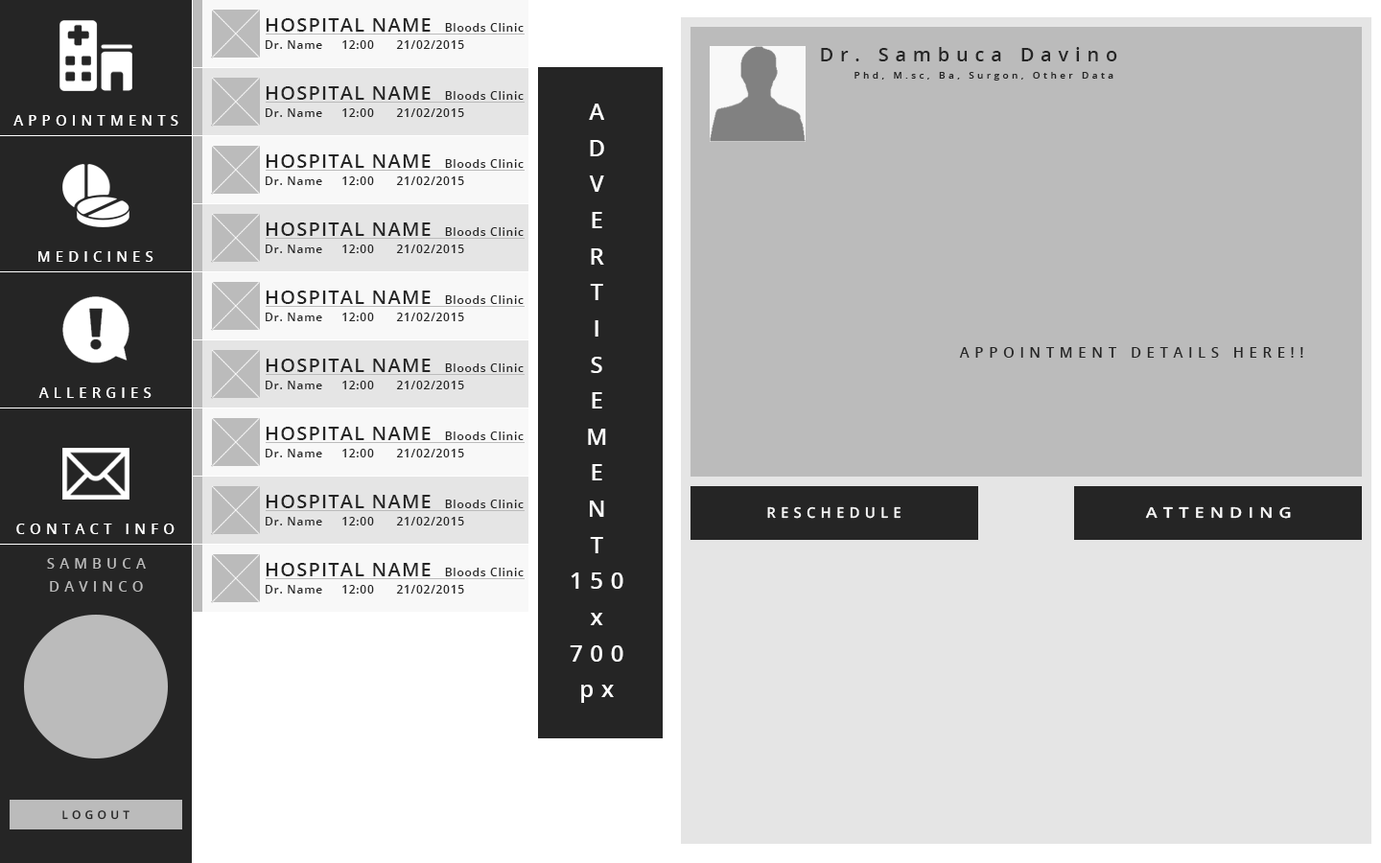
<style>
.page{position:relative;width:1381px;height:863px;background:#bbbbbb}
.page>*{position:absolute;margin:0}
.t1{font:19.2px "OpenSans-Semibold";letter-spacing:0.06em;color:#252525}
.t2{font:11.5px "OpenSans-Semibold";letter-spacing:0.06em;color:#252525}
.t3{font:9.6px/17.3px "OpenSans-Semibold";letter-spacing:0.34em;color:#252525}
.t4{font:19.2px "OpenSans-Semibold";letter-spacing:0.34em;color:#252525}
.t5{font:22.6px/36.1px "OpenSans-Semibold";letter-spacing:0.34em;color:#ffffff}
.t6{font:14.4px "OpenSans-Semibold";letter-spacing:0.34em;color:#ffffff}
.t7{font:14.9px "OpenSans-Semibold";letter-spacing:0.34em;color:#252525}
.t8{font:14.5px "OpenSans-Semibold";letter-spacing:0.34em;color:#f8f8f8}
.t9{font:14.5px "OpenSans-Semibold";letter-spacing:0.34em;color:#f8f8f8;scale:1.19 1}
.t10{font:11.5px "OpenSans-Semibold";letter-spacing:0.34em;color:#252525}
</style>
<div class="page">
<p class="t1" style="left:266px;top:18px;width:258px;height:14px">HOSPITAL NAME  <span class="t2">Bloods Clinic</span></p>
<p class="t2" style="left:266px;top:40px;width:198px;height:9px">Dr. Name     12:00      21/02/2015</p>
<p class="t3" style="left:821px;top:47px;width:296px;height:34px"><span class="t4">Dr. Sambuca Davino<br></span> Phd, M.sc, Ba, Surgon, Other Data</p>
<p class="t1" style="left:266px;top:86px;width:258px;height:14px">HOSPITAL NAME  <span class="t2">Bloods Clinic</span></p>
<p class="t2" style="left:266px;top:108px;width:198px;height:9px">Dr. Name     12:00      21/02/2015</p>
<p class="t5" style="left:570px;top:104px;width:53px;height:599px;text-align:center">A<br>D<br>V<br>E<br>R<br>T<br>I<br>S<br>E<br>M<br>E<br>N<br>T<br>150<br>x<br>700<br>px</p>
<p class="t6" style="left:13px;top:115px;width:165px;height:11px">APPOINTMENTS</p>
<p class="t1" style="left:266px;top:154px;width:258px;height:14px">HOSPITAL NAME  <span class="t2">Bloods Clinic</span></p>
<p class="t2" style="left:266px;top:176px;width:198px;height:9px">Dr. Name     12:00      21/02/2015</p>
<p class="t1" style="left:266px;top:223px;width:258px;height:13px">HOSPITAL NAME  <span class="t2">Bloods Clinic</span></p>
<p class="t2" style="left:266px;top:245px;width:198px;height:8px">Dr. Name     12:00      21/02/2015</p>
<p class="t6" style="left:38px;top:251px;width:115px;height:11px">MEDICINES</p>
<p class="t1" style="left:266px;top:291px;width:258px;height:13px">HOSPITAL NAME  <span class="t2">Bloods Clinic</span></p>
<p class="t2" style="left:266px;top:313px;width:198px;height:8px">Dr. Name     12:00      21/02/2015</p>
<p class="t7" style="left:959px;top:347px;width:345px;height:11px">APPOINTMENT DETAILS HERE!!</p>
<p class="t1" style="left:266px;top:359px;width:258px;height:13px">HOSPITAL NAME  <span class="t2">Bloods Clinic</span></p>
<p class="t6" style="left:38px;top:388px;width:114px;height:10px">ALLERGIES</p>
<p class="t2" style="left:266px;top:381px;width:198px;height:8px">Dr. Name     12:00      21/02/2015</p>
<p class="t1" style="left:266px;top:427px;width:258px;height:13px">HOSPITAL NAME  <span class="t2">Bloods Clinic</span></p>
<p class="t2" style="left:266px;top:449px;width:198px;height:9px">Dr. Name     12:00      21/02/2015</p>
<p class="t1" style="left:266px;top:495px;width:258px;height:13px">HOSPITAL NAME  <span class="t2">Bloods Clinic</span></p>
<p class="t8" style="left:767px;top:506px;width:134px;height:13px">RESCHEDULE</p>
<p class="t9" style="left:1145px;top:506px;width:146px;height:13px">ATTENDING</p>
<p class="t2" style="left:266px;top:517px;width:198px;height:9px">Dr. Name     12:00      21/02/2015</p>
<p class="t6" style="left:16px;top:524px;width:159px;height:10px">CONTACT INFO</p>
<p class="t1" style="left:266px;top:563px;width:258px;height:13px">HOSPITAL NAME  <span class="t2">Bloods Clinic</span></p>
<p class="t2" style="left:266px;top:585px;width:198px;height:9px">Dr. Name     12:00      21/02/2015</p>
<p class="t10" style="left:62px;top:811px;width:67px;height:9px">LOGOUT</p>
</div>
